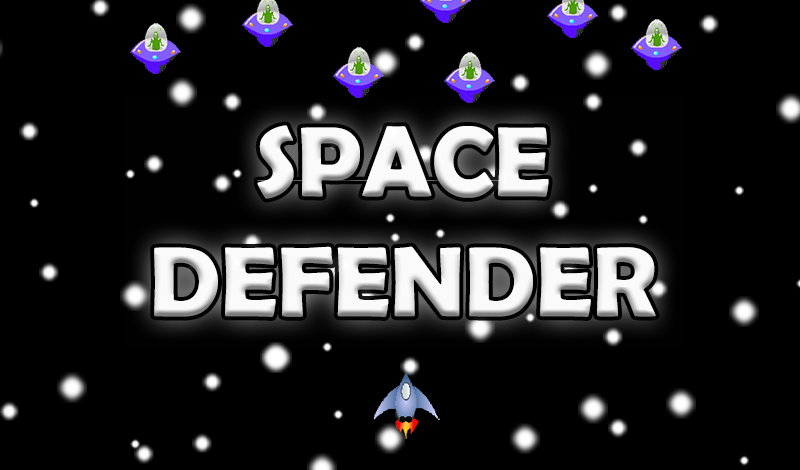
<style>
.page{position:relative;width:800px;height:470px;background:#000000}
.page>*{position:absolute;margin:0}
.t1{font:100.1px "BerlinSansFBDemi-Bold";color:#ffffff;text-transform:uppercase}
</style>
<div class="page">
<p class="t1" style="left:154px;top:125px;width:502px;height:192px;text-align:center;opacity:0.97">SPACE<br>DEFENDER</p>
</div>
